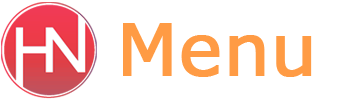
<style>
.page{position:relative;width:346px;height:100px;background:#ffffff}
.page>*{position:absolute;margin:0}
.t1{font:72px "MSReferenceSansSerif";color:#ff9b44;font-weight:bold}
</style>
<div class="page">
<p class="t1" style="left:123px;top:23px;width:189px;height:54px">Menu</p>
</div>
